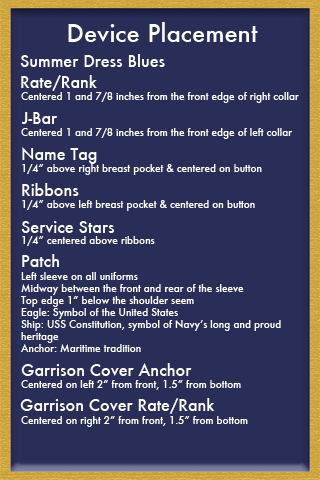
<style>
.page{position:relative;width:320px;height:480px;background:#292e59}
.page>*{position:absolute;margin:0}
.t1{font:24px "Futura-Medium";color:#ffffff}
.t2{font:16px "Futura-Medium";color:#ffffff}
.t3{font:10px "Futura-Medium";color:#ffffff}
</style>
<div class="page">
<p class="t1" style="left:68px;top:22px;width:190px;height:20px">Device Placement</p>
<p class="t2" style="left:20px;top:54px;width:145px;height:13px">Summer Dress Blues</p>
<p class="t2" style="left:21px;top:75px;width:76px;height:16px">Rate/Rank</p>
<p class="t3" style="left:20px;top:92px;width:279px;height:335px">Centered 1 and 7/8 inches from the front edge of right collar<br><br><br>Centered 1 and 7/8 inches from the front edge of left collar<br><br><br>1/4” above right breast pocket &amp; centered on button<br><br><br>1/4” above left breast pocket &amp; centered on button<br><br><br>1/4” centered above ribbons<br><br><br>Left sleeve on all uniforms<br>Midway between the front and rear of the sleeve<br>Top edge 1” below the shoulder seem<br>Eagle: Symbol of the United States<br>Ship: USS Constitution, symbol of Navy’s long and proud <br>heritage<br>Anchor: Maritime tradition<br><br><br>Centered on left 2” from front, 1.5” from bottom<br><br><br>Centered on right 2” from front, 1.5” from bottom</p>
<p class="t2" style="left:21px;top:112px;width:37px;height:12px">J-Bar</p>
<p class="t2" style="left:22px;top:147px;width:75px;height:17px">Name Tag</p>
<p class="t2" style="left:22px;top:183px;width:57px;height:13px">Ribbons</p>
<p class="t2" style="left:21px;top:221px;width:94px;height:12px">Service Stars</p>
<p class="t2" style="left:22px;top:254px;width:37px;height:13px">Patch</p>
<p class="t2" style="left:21px;top:363px;width:171px;height:13px">Garrison Cover Anchor</p>
<p class="t2" style="left:20px;top:398px;width:195px;height:16px">Garrison Cover Rate/Rank</p>
</div>
